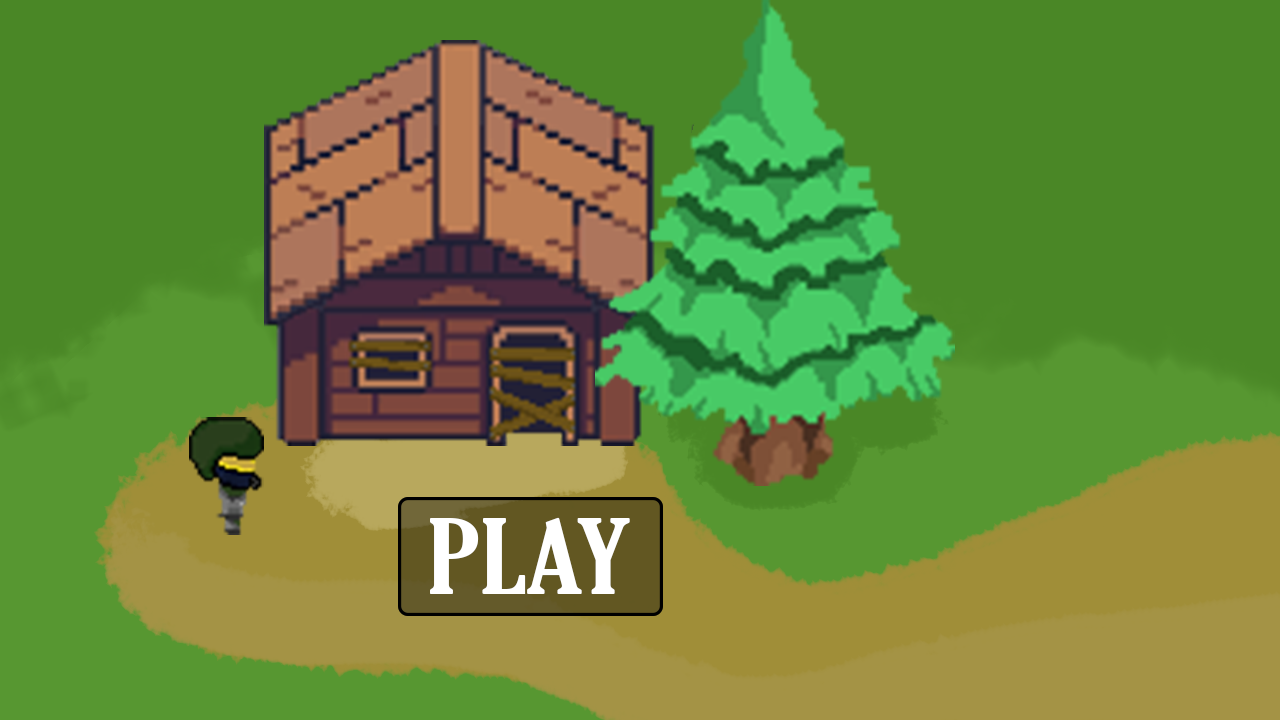
<style>
.page{position:relative;width:1280px;height:720px;background:#4a8726}
.page>*{position:absolute;margin:0}
.t1{font:100px "GloucesterMT-ExtraCondensed";color:#ffffff;scale:1.3 1}
</style>
<div class="page">
<p class="t1" style="left:430px;top:517px;width:200px;height:77px">PLAY</p>
</div>
